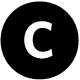
<style>
.page{position:relative;width:80px;height:80px;background:#000000}
.page>*{position:absolute;margin:0}
.t1{font:83px "WhitneyIndexBlack-RoundBd";color:#000000}
</style>
<div class="page">
<p class="t1" style="left:0px;top:1px;width:79px;height:79px">C</p>
</div>
